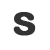
<style>
.page{position:relative;width:50px;height:50px;background:#ffffff}
.page>*{position:absolute;margin:0}
.t1{font:43.1px "ArialRoundedMTBold";letter-spacing:0.1em;color:#333333;font-weight:bold}
</style>
<div class="page">
<p class="t1" style="left:13px;top:12px;width:23px;height:24px">s</p>
</div>
